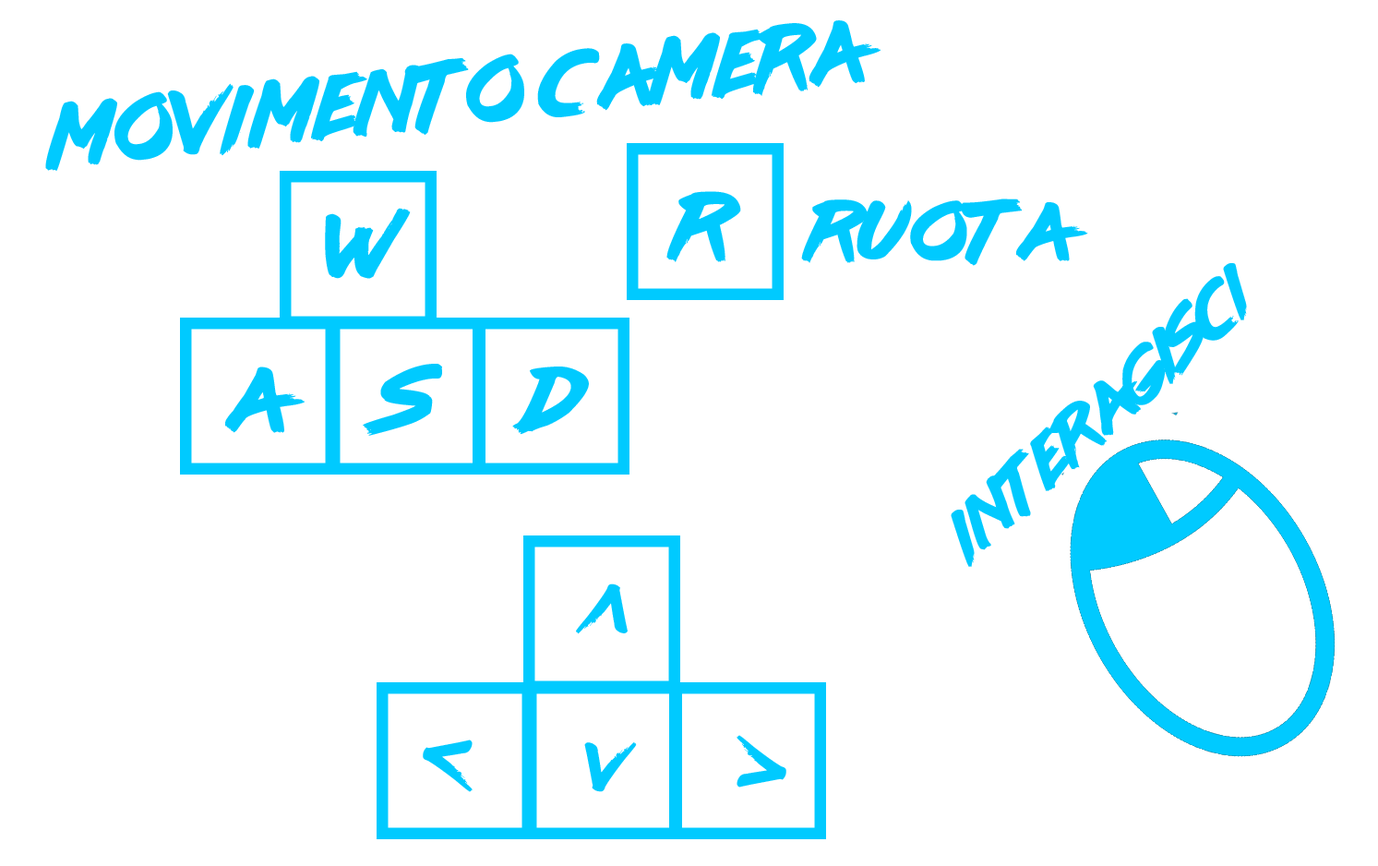
<style>
.page{position:relative;width:1378px;height:866px;background:#ffffff}
.page>*{position:absolute;margin:0}
.t1{font:79.6px "lazer84";color:#00caff;scale:0.95 1}
.t2{font:81.2px "lazer84";color:#00caff}
.t3{font:72.9px "lazer84";color:#00caff}
.t4{font:61.8px "lazer84";color:#00caff}
.t5{font:59.3px "lazer84";color:#00caff}
.t6{font:59.1px "lazer84";color:#00caff}
</style>
<div class="page">
<p class="t1" style="left:45px;top:20px;width:835px;height:151px;rotate:-6deg">MOVIMENTO CAMERA</p>
<p class="t2" style="left:666px;top:191px;width:75px;height:71px">R</p>
<p class="t2" style="left:325px;top:208px;width:86px;height:71px">W</p>
<p class="t3" style="left:801px;top:198px;width:287px;height:68px">RUOTA</p>
<p class="t4" style="left:950px;top:263px;width:297px;height:304px;rotate:-42deg">INTERAGISCI</p>
<p class="t2" style="left:363px;top:364px;width:79px;height:72px">S</p>
<p class="t2" style="left:225px;top:366px;width:80px;height:67px">A</p>
<p class="t2" style="left:512px;top:366px;width:77px;height:69px">D</p>
<p class="t5" style="left:576px;top:583px;width:51px;height:51px;rotate:180deg">v</p>
<p class="t5" style="left:736px;top:735px;width:50px;height:52px;rotate:-90deg">v</p>
<p class="t5" style="left:423px;top:739px;width:49px;height:53px;rotate:90deg">v</p>
<p class="t6" style="left:584px;top:742px;width:53px;height:50px">v</p>
</div>
